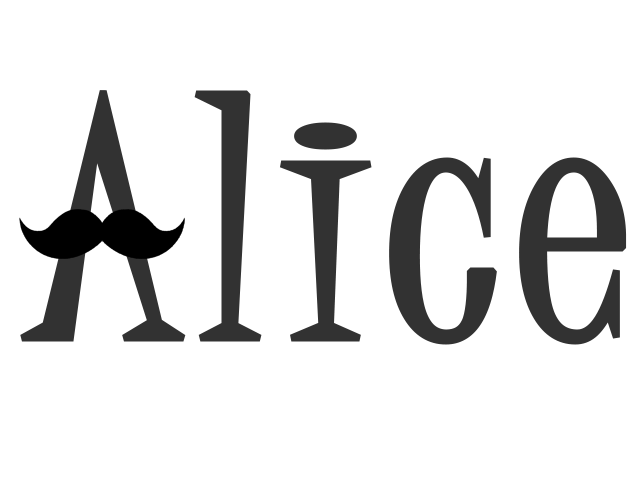
<style>
.page{position:relative;width:640px;height:480px;background:#ffffff}
.page>*{position:absolute;margin:0}
.t1{font:327.7px "JuiceITC-Regular";color:#323232;font-weight:bold;scale:1.25 1}
</style>
<div class="page">
<p class="t1" style="left:20px;top:90px;width:607px;height:255px">Alice</p>
</div>
